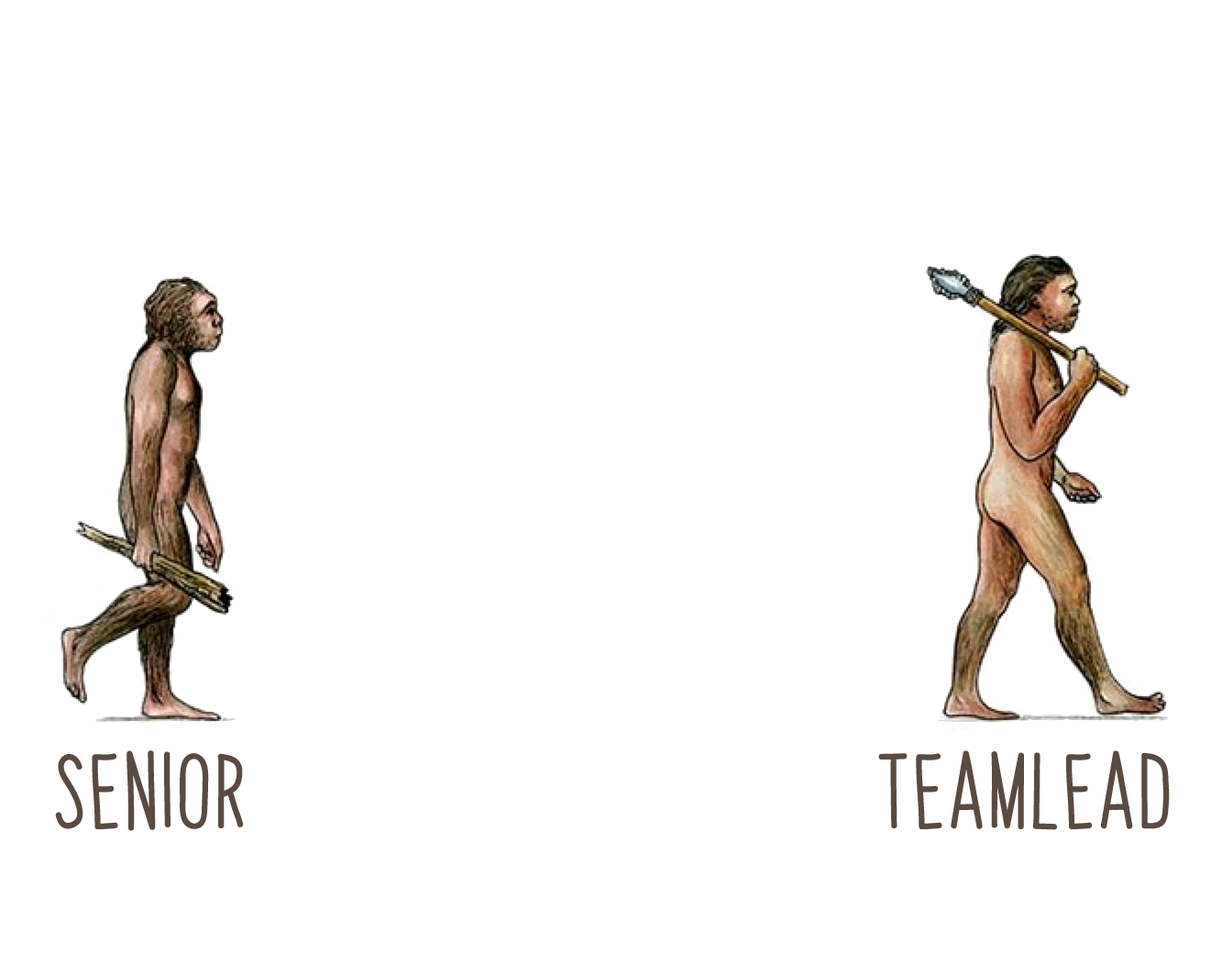
<style>
.page{position:relative;width:1222px;height:976px;background:#ffffff}
.page>*{position:absolute;margin:0}
.t1{font:64.2px "PapayaSunrise";color:#594a42;font-weight:bold}
</style>
<div class="page">
<p class="t1" style="left:55px;top:750px;width:189px;height:81px">senior</p>
<p class="t1" style="left:878px;top:750px;width:292px;height:80px">teamlead</p>
</div>
